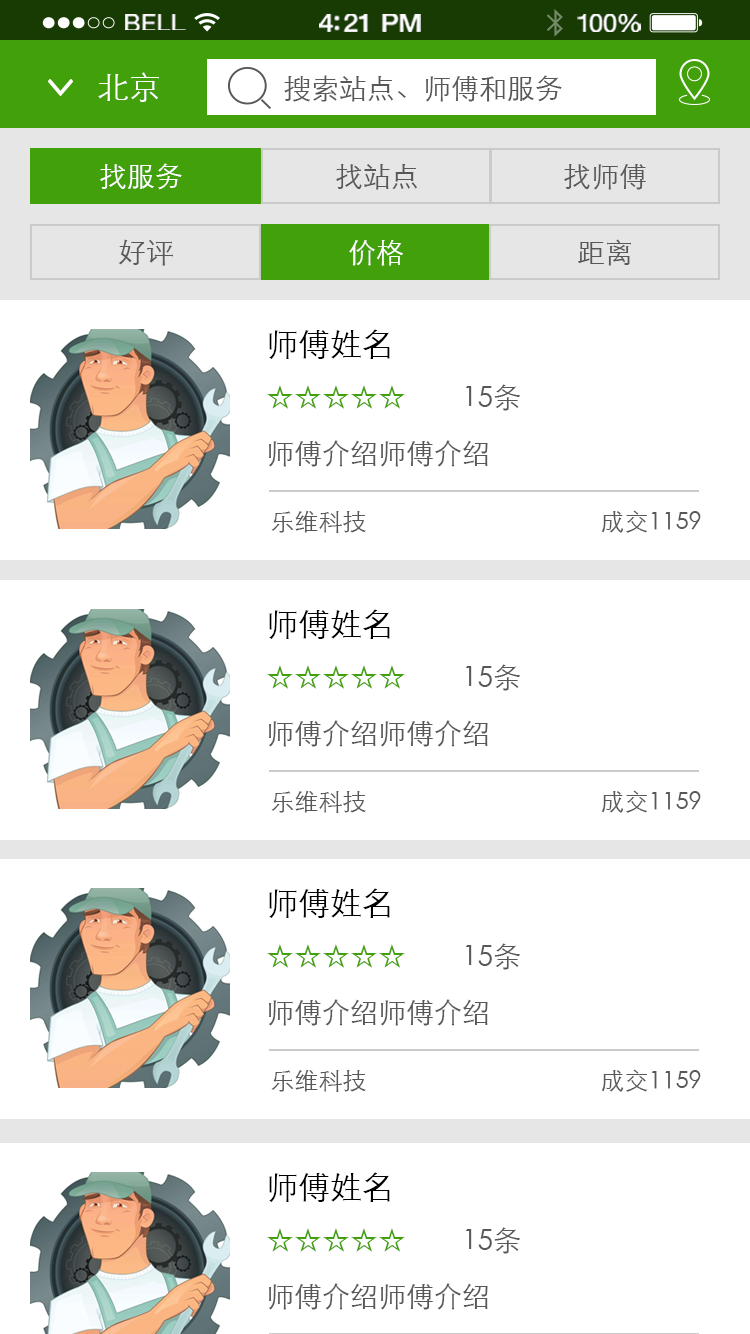
<style>
.page{position:relative;width:750px;height:1334px;background:#ffffff}
.page>*{position:absolute;margin:0}
.t1{font:23.3px "HelveticaNeue";letter-spacing:0.02em;color:#ffffff;scale:1.06 1}
.t2{font:25.3px "HelveticaNeue-Medium";letter-spacing:-0.02em;color:#ffffff;scale:1.06 1}
.t3{font:24.3px "HelveticaNeue";letter-spacing:-0.02em;color:#ffffff;scale:1.06 1}
.t4{font:32px "STXihei";color:#ffffff}
.t5{font:28px "STXihei";color:#595757}
.t6{font:28px "STXihei";color:#ffffff}
.t7{font:28px/56px "STXihei";color:#595757}
.t8{font:32px/56px "STXihei";color:#000000}
.t9{font:28px/56px "STXihei";color:#42a00a}
.t10{font:24px "STXihei";color:#595757}
</style>
<div class="page">
<p class="t1" style="left:125px;top:14px;width:61px;height:16px">BELL</p>
<p class="t2" style="left:319px;top:14px;width:102px;height:18px">4:21 PM</p>
<p class="t3" style="left:577px;top:14px;width:64px;height:18px">100%</p>
<p class="t4" style="left:98px;top:72px;width:61px;height:30px">北京</p>
<p class="t5" style="left:284px;top:75px;width:278px;height:27px">搜索站点、师傅和服务</p>
<p class="t6" style="left:100px;top:163px;width:82px;height:27px">找服务</p>
<p class="t5" style="left:336px;top:164px;width:81px;height:26px">找站点</p>
<p class="t5" style="left:564px;top:164px;width:82px;height:26px">找师傅</p>
<p class="t5" style="left:118px;top:239px;width:55px;height:27px">好评</p>
<p class="t6" style="left:349px;top:239px;width:54px;height:27px">价格</p>
<p class="t5" style="left:578px;top:239px;width:54px;height:27px">距离</p>
<p class="t7" style="left:267px;top:329px;width:253px;height:138px"><span class="t8">师傅姓名<br></span><span class="t9">☆☆☆☆☆</span>        15条<br>师傅介绍师傅介绍</p>
<p class="t10" style="left:271px;top:510px;width:430px;height:23px">乐维科技                                       成交1159</p>
<p class="t7" style="left:267px;top:609px;width:253px;height:138px"><span class="t8">师傅姓名<br></span><span class="t9">☆☆☆☆☆</span>        15条<br>师傅介绍师傅介绍</p>
<p class="t10" style="left:271px;top:790px;width:430px;height:23px">乐维科技                                       成交1159</p>
<p class="t7" style="left:267px;top:888px;width:253px;height:138px"><span class="t8">师傅姓名<br></span><span class="t9">☆☆☆☆☆</span>        15条<br>师傅介绍师傅介绍</p>
<p class="t10" style="left:271px;top:1069px;width:430px;height:23px">乐维科技                                       成交1159</p>
<p class="t7" style="left:267px;top:1172px;width:253px;height:138px"><span class="t8">师傅姓名<br></span><span class="t9">☆☆☆☆☆</span>        15条<br>师傅介绍师傅介绍</p>
</div>
